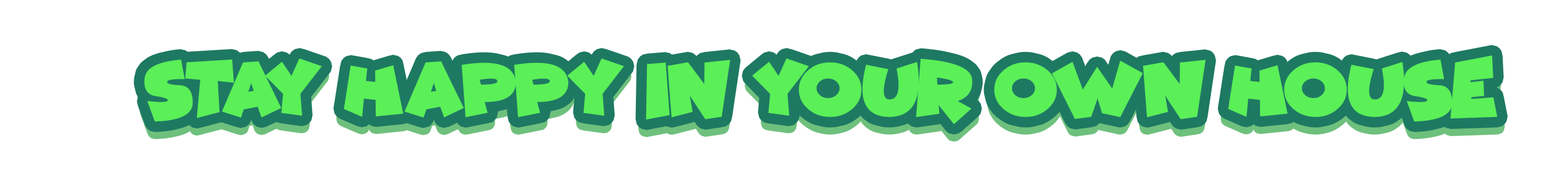
<style>
.page{position:relative;width:1568px;height:181px;background:#ffffff}
.page>*{position:absolute;margin:0}
.t1{font:75.8px "ComicKings";letter-spacing:-0.01em;color:#5bef58}
</style>
<div class="page">
<p class="t1" style="left:144px;top:55px;width:1353px;height:69px">Stay happy in your own house</p>
</div>
